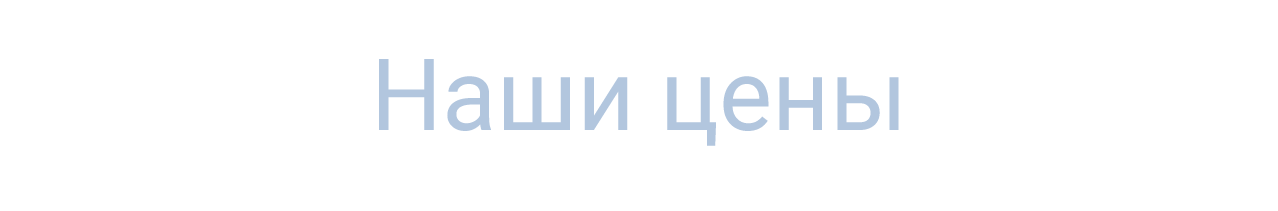
<style>
.page{position:relative;width:1278px;height:211px;background:#ffffff}
.page>*{position:absolute;margin:0}
.t1{font:100px "Roboto-Regular";color:#b2c6de}
</style>
<div class="page">
<p class="t1" style="left:379px;top:59px;width:520px;height:87px">Наши цены</p>
</div>
